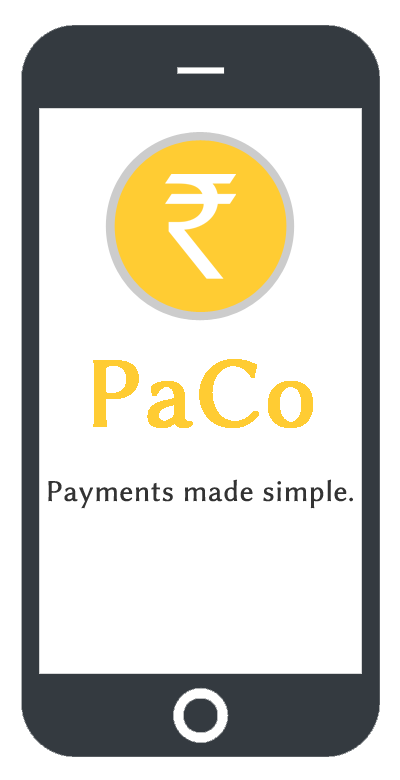
<style>
.page{position:relative;width:400px;height:780px;background:#ffffff}
.page>*{position:absolute;margin:0}
.t1{font:100px "LinuxBiolinumG";color:#ffcc33;font-weight:bold}
.t2{font:30px "LinuxBiolinumG";color:#333333;font-weight:bold}
</style>
<div class="page">
<p class="t1" style="left:93px;top:359px;width:220px;height:69px">PaCo</p>
<p class="t2" style="left:48px;top:479px;width:305px;height:30px">Payments made simple.</p>
</div>
